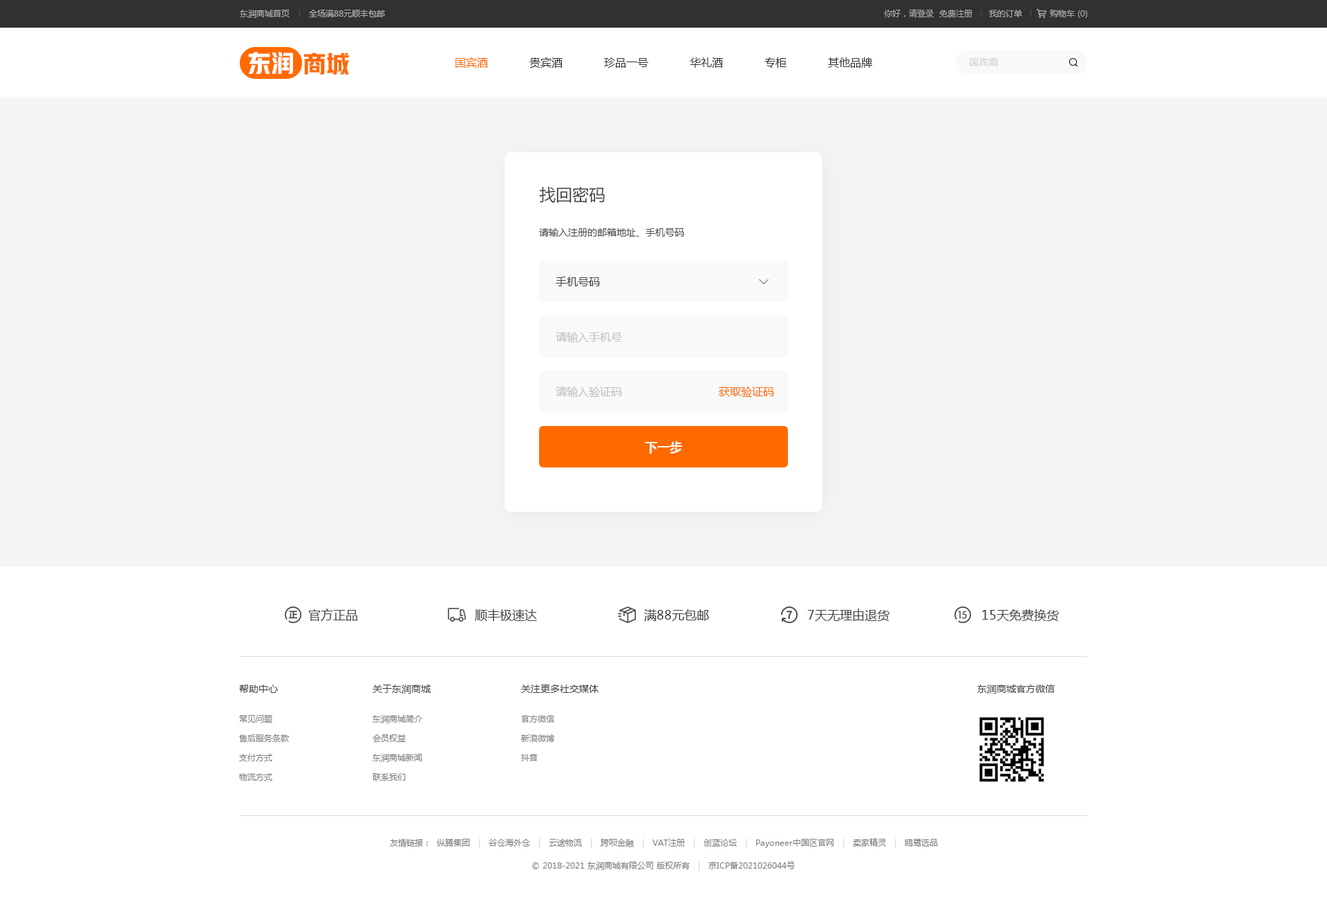
<style>
.page{position:relative;width:1327px;height:899px;background:#ffffff}
.page>*{position:absolute;margin:0}
.t1{font:8.3px "MicrosoftYaHei";color:#b0b0b0}
.t2{font:8.3px "MicrosoftYaHei";color:#acacac}
.t3{font:23.5px "HYYakuHei-HEW";color:#ffffff}
.t4{font:23.5px "HYYakuHei-HEW";color:#ff6a00}
.t5{font:11.1px "MicrosoftYaHei";color:#333333}
.t6{font:11.1px "MicrosoftYaHei";color:#ff6a00}
.t7{font:9.7px "MicrosoftYaHei";color:#d2d2d2}
.t8{font:16.6px "MicrosoftYaHei";color:#434343}
.t9{font:9.7px "MicrosoftYaHei";color:#4b4b4b}
.t10{font:11.1px "MicrosoftYaHei";color:#434343}
.t11{font:11.1px "MicrosoftYaHei";color:#bfbfbf}
.t12{font:12.4px "MicrosoftYaHei-Bold";color:#ffffff}
.t13{font:12.4px "MicrosoftYaHei";color:#434343}
.t14{font:9.7px "MicrosoftYaHei";color:#434343}
.t15{font:8.3px/19.4px "MicrosoftYaHei";color:#7d7d7d}
.t16{font:8.3px "MicrosoftYaHei";color:#7d7d7d}
.t17{font:8.3px "MicrosoftYaHei";color:#d2d2d2}
</style>
<div class="page">
<p class="t1" style="left:240px;top:10px;width:145px;height:8px">东润商城首页       全场满88元顺丰包邮</p>
<p class="t2" style="left:884px;top:9px;width:204px;height:9px">你好，请登录  免费注册      我的订单          购物车 (0)</p>
<p class="t3" style="left:248px;top:52px;width:45px;height:22px">东润</p>
<p class="t4" style="left:303px;top:53px;width:46px;height:22px">商城</p>
<p class="t5" style="left:455px;top:57px;width:417px;height:11px"><span class="t6">国宾酒</span>            贵宾酒            珍品一号            华礼酒            专柜            其他品牌</p>
<p class="t7" style="left:970px;top:58px;width:28px;height:8px">国宾酒</p>
<p class="t8" style="left:539px;top:187px;width:66px;height:16px">找回密码</p>
<p class="t9" style="left:539px;top:228px;width:145px;height:9px">请输入注册的邮箱地址、手机号码</p>
<p class="t10" style="left:556px;top:276px;width:44px;height:10px">手机号码</p>
<p class="t11" style="left:556px;top:332px;width:66px;height:10px">请输入手机号</p>
<p class="t11" style="left:556px;top:386px;width:66px;height:11px">请输入验证码</p>
<p class="t6" style="left:719px;top:386px;width:55px;height:11px">获取验证码</p>
<p class="t12" style="left:645px;top:441px;width:37px;height:12px">下一步</p>
<p class="t13" style="left:309px;top:608px;width:48px;height:13px">官方正品</p>
<p class="t13" style="left:475px;top:609px;width:62px;height:12px">顺丰极速达</p>
<p class="t13" style="left:644px;top:609px;width:65px;height:12px">满88元包邮</p>
<p class="t13" style="left:807px;top:608px;width:83px;height:13px">7天无理由退货</p>
<p class="t13" style="left:982px;top:609px;width:77px;height:12px">15天免费换货</p>
<p class="t14" style="left:239px;top:684px;width:39px;height:9px">帮助中心</p>
<p class="t14" style="left:373px;top:684px;width:58px;height:9px">关于东润商城</p>
<p class="t14" style="left:521px;top:684px;width:78px;height:9px">关注更多社交媒体</p>
<p class="t14" style="left:977px;top:684px;width:78px;height:9px">东润商城官方微信</p>
<p class="t15" style="left:239px;top:715px;width:50px;height:65px">常见问题<br>售后服务条款<br>支付方式<br>物流方式</p>
<p class="t15" style="left:373px;top:715px;width:49px;height:65px">东润商城简介<br>会员权益<br>东润商城新闻<br>联系我们</p>
<p class="t15" style="left:521px;top:715px;width:33px;height:46px">官方微信<br>新浪微博<br>抖音</p>
<p class="t16" style="left:390px;top:838px;width:548px;height:9px">友情链接：  纵腾集团   <span class="t17">|   </span>谷仓海外仓   <span class="t17">|   </span>云途物流   <span class="t17">|   </span>跨呗金融   <span class="t17">|   </span>VAT注册   <span class="t17">|   </span>创蓝论坛   <span class="t17">|   </span>Payoneer中国区官网   <span class="t17">|   </span>卖家精灵   <span class="t17">|   </span>鸥鹭选品</p>
<p class="t16" style="left:532px;top:861px;width:263px;height:9px">© 2018-2021 东润商城有限公司 版权所有   <span class="t17">|   </span>京ICP备2021026044号</p>
</div>
